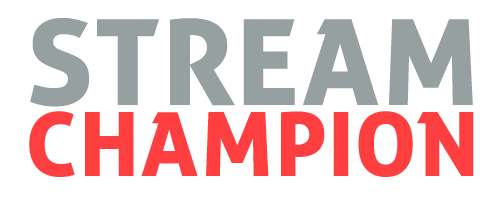
<style>
.page{position:relative;width:500px;height:200px;background:#ffffff}
.page>*{position:absolute;margin:0}
.t1{font:120px "zwodrei-Bold";letter-spacing:0.01em;color:#96a0a0}
.t2{font:89.4px "zwodrei-Bold";letter-spacing:0.01em;color:#ff3f3f}
</style>
<div class="page">
<p class="t1" style="left:30px;top:18px;width:443px;height:89px">STREAM</p>
<p class="t2" style="left:29px;top:111px;width:445px;height:66px">CHAMPION</p>
</div>
